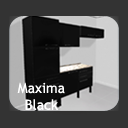
<style>
.page{position:relative;width:128px;height:128px;background:#333333}
.page>*{position:absolute;margin:0}
.t1{font:14px "TrebuchetMS";color:#ffffff}
</style>
<div class="page">
<p class="t1" style="left:17px;top:82px;width:48px;height:28px;text-align:center">Maxima<br>Black</p>
</div>
